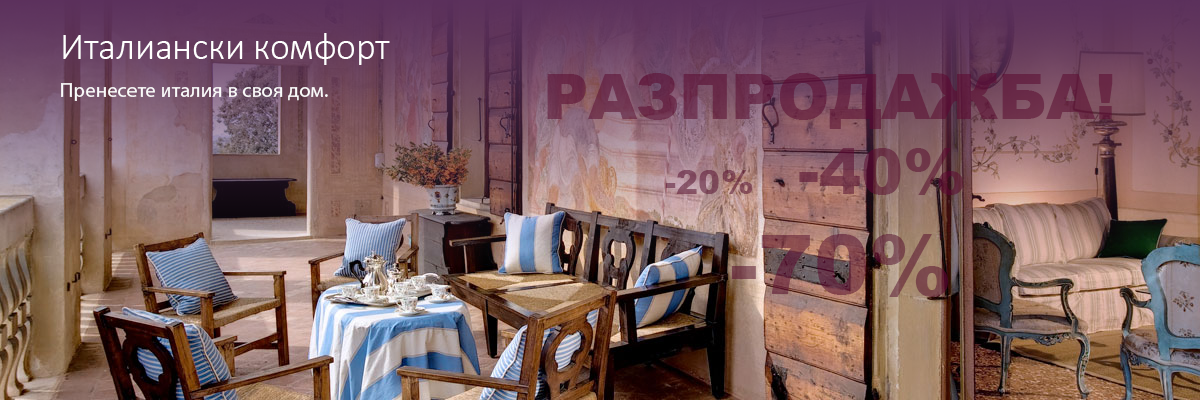
<style>
.page{position:relative;width:1200px;height:400px}
.page>*{position:absolute;margin:0}
.t1{font:37.5px "Calibri-Light";color:#ffffff}
.t2{font:62.5px "Arial-Black";color:#6b2e48}
.t3{font:33.4px "Arial-Black";color:#6b2e48}
.t4{font:83.4px "Arial-Black";color:#6b2e48}
.t5{font:20.9px "MyriadPro-Regular";color:#fafafa}
</style>
<div class="page">
<p class="t1" style="left:63px;top:33px;width:327px;height:32px">Италиански комфорт</p>
<p class="t2" style="left:547px;top:73px;width:566px;height:224px">РАЗПРОДАЖБА!<br><span class="t3">           -20%    </span>-40%<br>         <span class="t4">-70%</span></p>
<p class="t5" style="left:61px;top:83px;width:267px;height:18px">Пренесете италия в своя дом.</p>
</div>
